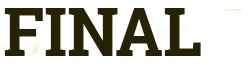
<style>
.page{position:relative;width:251px;height:65px;background:#ffffff}
.page>*{position:absolute;margin:0}
.t1{font:66.7px "RobotoSlab-Bold";color:#262305}
</style>
<div class="page">
<p class="t1" style="left:4px;top:8px;width:197px;height:48px">FINAL</p>
</div>
